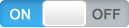
<style>
.page{position:relative;width:129px;height:28px}
.page>*{position:absolute;margin:0}
.t1{font:14px "ArialMT";color:#ffffff;font-weight:bold}
.t2{font:14px "ArialMT";color:#565656;font-weight:bold}
</style>
<div class="page">
<p class="t1" style="left:10px;top:8px;width:20px;height:12px">ON</p>
<p class="t2" style="left:92px;top:8px;width:29px;height:12px">OFF</p>
</div>
